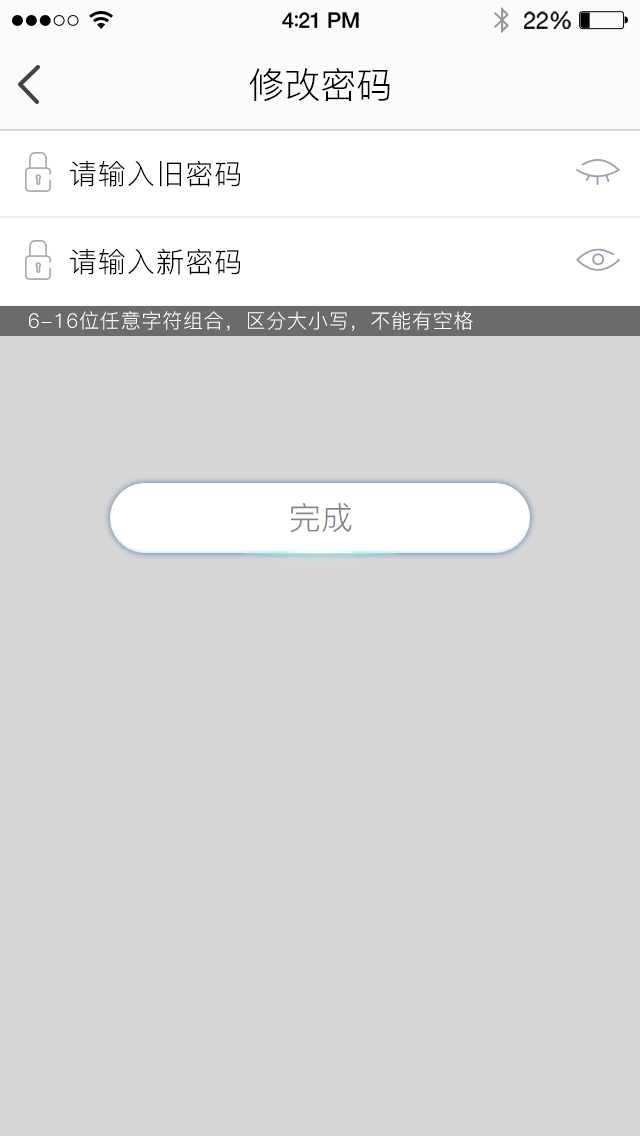
<style>
.page{position:relative;width:640px;height:1136px;background:#d6d6d7}
.page>*{position:absolute;margin:0}
.t1{font:36px "PingFang-SC-Regular";color:#000000}
.t2{font:28px "PingFang-SC-Regular";letter-spacing:0.04em;color:#000000}
.t3{font:20px "PingFang-SC-Regular";letter-spacing:0.04em;color:#ffffff}
.t4{font:32px "PingFang-SC-Regular";color:#7f8393}
</style>
<div class="page">
<p class="t1" style="left:249px;top:68px;width:141px;height:34px">修改密码</p>
<p class="t2" style="left:70px;top:160px;width:170px;height:27px">请输入旧密码</p>
<p class="t2" style="left:70px;top:248px;width:170px;height:27px">请输入新密码</p>
<p class="t3" style="left:29px;top:311px;width:444px;height:20px">6-16位任意字符组合，区分大小写，不能有空格</p>
<p class="t4" style="left:290px;top:502px;width:62px;height:31px">完成</p>
</div>
